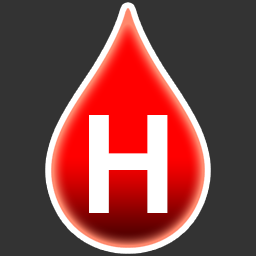
<style>
.page{position:relative;width:256px;height:256px;background:#333333}
.page>*{position:absolute;margin:0}
.t1{font:136.9px "Arial-BoldMT";color:#ffffff}
</style>
<div class="page">
<p class="t1" style="left:89px;top:115px;width:79px;height:98px">H</p>
</div>
